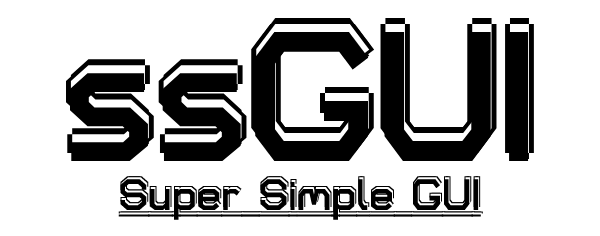
<style>
.page{position:relative;width:600px;height:236px;background:#ffffff}
.page>*{position:absolute;margin:0}
.t1{font:184.3px "TurretRoad-ExtraBold";color:#000000}
.t2{font:44px "TurretRoad-ExtraBold";text-decoration:underline}
.t3{font:44px "TurretRoad-ExtraBold";color:#000000;text-decoration:underline}
</style>
<div class="page">
<p class="t1" style="left:66px;top:24px;width:459px;height:129px">ssGUI</p>
<p class="t1" style="left:70px;top:24px;width:459px;height:129px">ssGUI</p>
<p class="t1" style="left:70px;top:30px;width:459px;height:129px">ssGUI</p>
<p class="t1" style="left:70px;top:18px;width:459px;height:129px">ssGUI</p>
<p class="t1" style="left:70px;top:24px;width:459px;height:129px">ssGUI</p>
<p class="t1" style="left:75px;top:24px;width:459px;height:129px">ssGUI</p>
<p class="t1" style="left:70px;top:32px;width:459px;height:129px">ssGUI</p>
<p class="t2" style="left:118px;top:176px;width:363px;height:41px">Super Simple GUI</p>
<p class="t3" style="left:118px;top:179px;width:363px;height:41px">Super Simple GUI</p>
<p class="t2" style="left:119px;top:177px;width:363px;height:41px">Super Simple GUI</p>
<p class="t2" style="left:120px;top:176px;width:363px;height:41px">Super Simple GUI</p>
</div>
